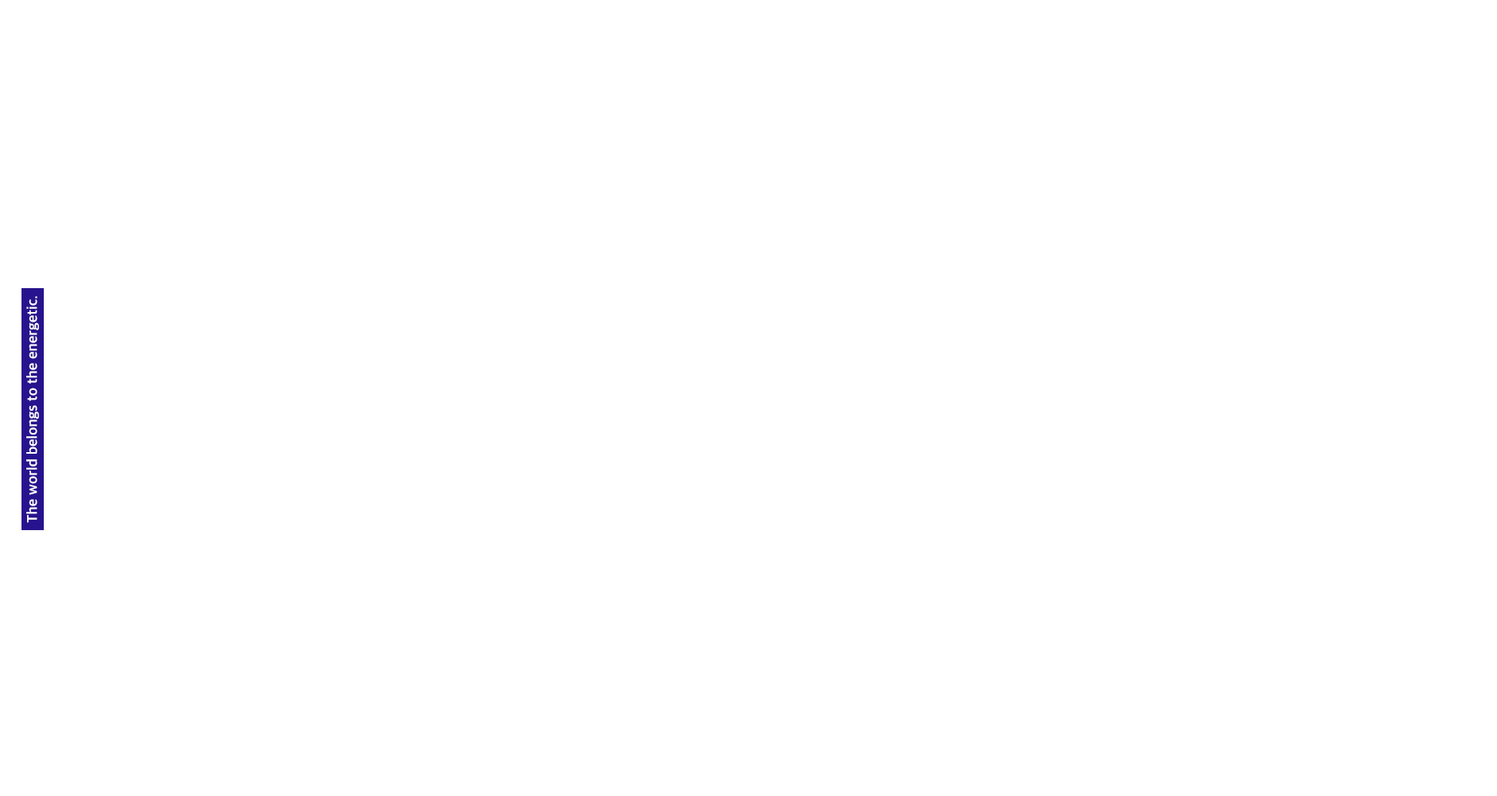
<style>
.page{position:relative;width:1497px;height:796px;background:#ffffff}
.page>*{position:absolute;margin:0}
.t1{font:14.3px "AppleSDGothicNeo-Bold";color:#ffffff}
</style>
<div class="page">
<p class="t1" style="left:26px;top:296px;width:13px;height:227px;rotate:-90deg">The world belongs to the energetic.</p>
</div>
